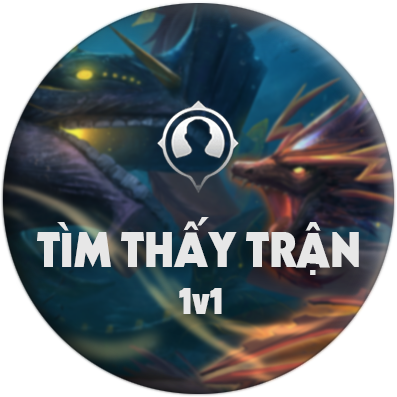
<style>
.page{position:relative;width:397px;height:397px;background:#ffffff}
.page>*{position:absolute;margin:0}
.t1{font:60px "SVN-Internation";color:#e7e7e7}
.t2{font:48px "SVN-Internation";color:#e7e7e7}
</style>
<div class="page">
<p class="t1" style="left:37px;top:217px;width:322px;height:58px">TÌM THẤY TRẬN</p>
<p class="t2" style="left:179px;top:288px;width:43px;height:26px">1v1</p>
</div>
